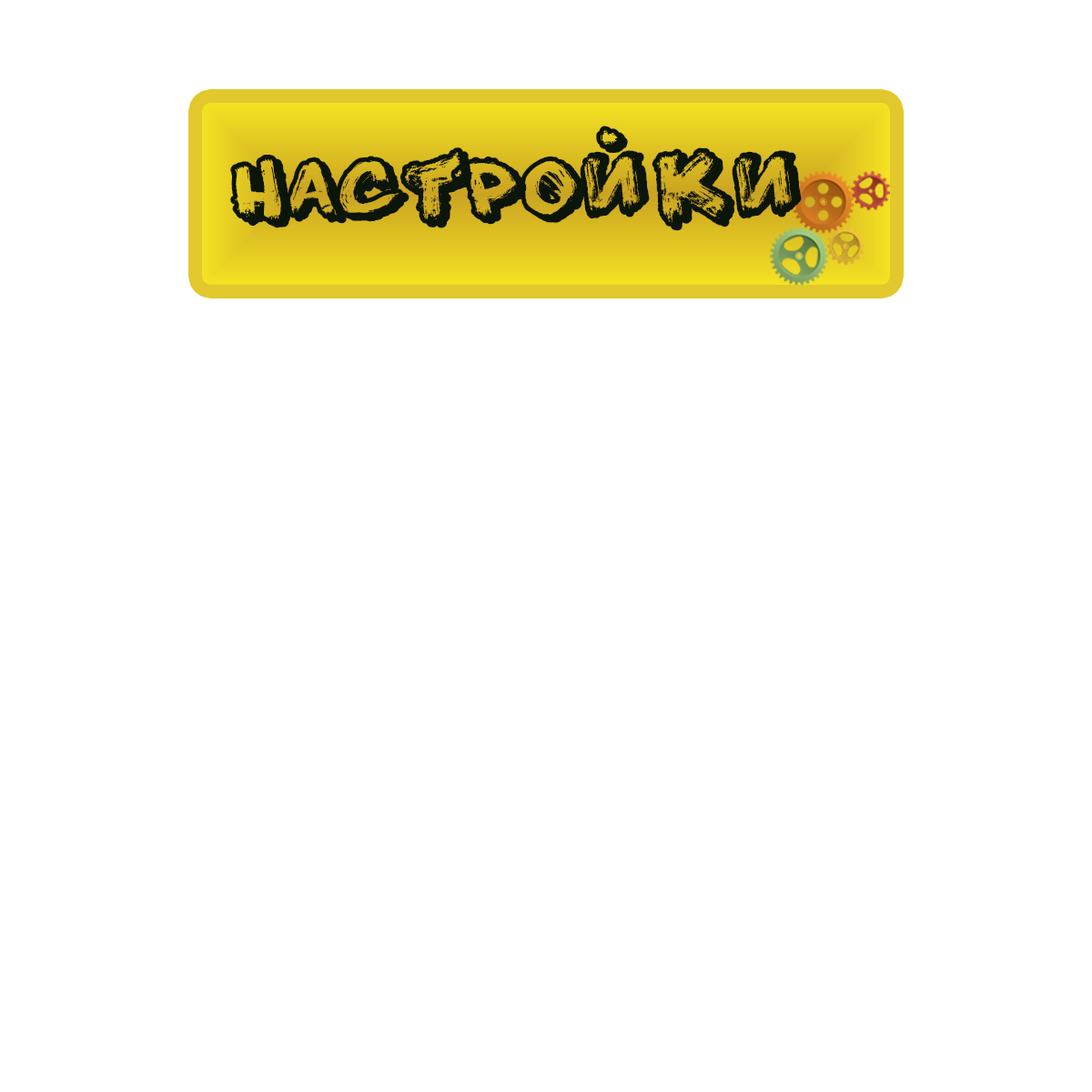
<style>
.page{position:relative;width:1092px;height:1092px;background:#ffffff}
.page>*{position:absolute;margin:0}
.t1{font:91px "ThisNight";letter-spacing:0.025em;color:#0c1509}
</style>
<div class="page">
<p class="t1" style="left:230px;top:126px;width:572px;height:105px">настройки</p>
</div>
